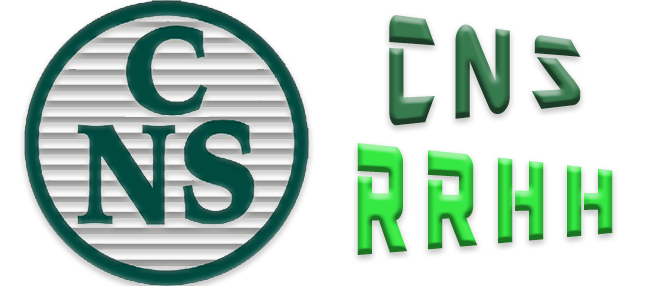
<style>
.page{position:relative;width:650px;height:286px;background:#ffffff}
.page>*{position:absolute;margin:0}
.t1{font:135px "ARDESTINE";letter-spacing:0.2em;scale:0.67 1}
</style>
<div class="page">
<p class="t1" style="left:389px;top:15px;width:192px;height:111px">CNS</p>
<p class="t1" style="left:357px;top:143px;width:256px;height:112px">RRHH</p>
</div>
